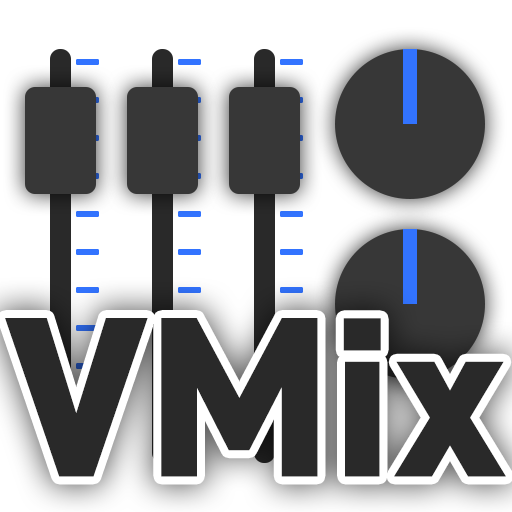
<style>
.page{position:relative;width:512px;height:512px;background:#ffffff}
.page>*{position:absolute;margin:0}
.t1{font:229.2px "DIN2014-ExtraBold";color:#292929}
</style>
<div class="page">
<p class="t1" style="left:5px;top:318px;width:501px;height:159px">VMix</p>
</div>
